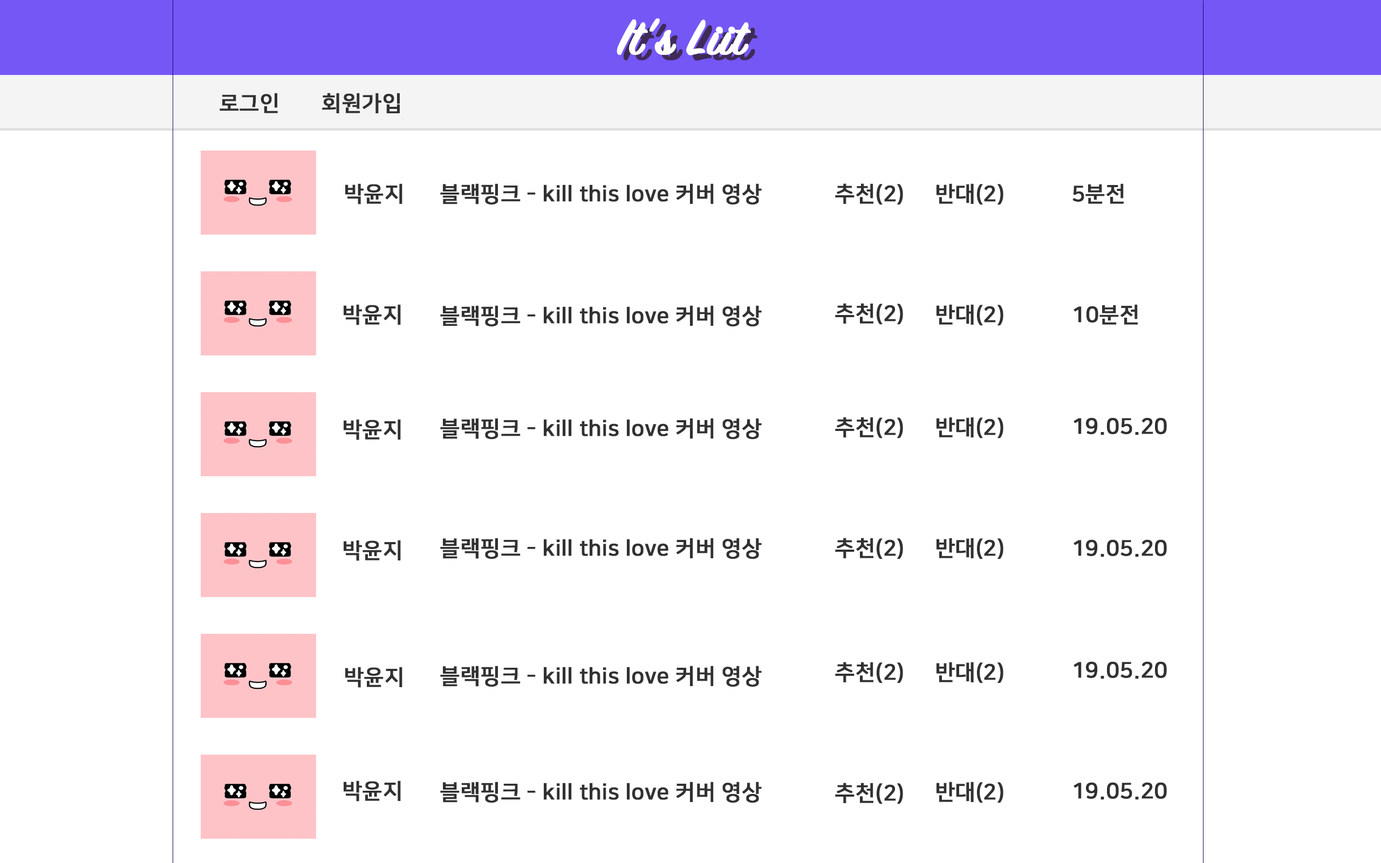
<style>
.page{position:relative;width:1381px;height:863px;background:#ffffff}
.page>*{position:absolute;margin:0}
.t1{font:54px "SignPainter-HouseScriptSemibold";color:#ffffff;font-weight:bold}
.t2{font:54px "SignPainter-HouseScriptSemibold";color:#3f2b56;font-weight:bold}
.t3{font:21.6px "NanumSquareB";color:#313131;font-weight:bold}
</style>
<div class="page">
<p class="t1" style="left:617px;top:18px;width:134px;height:38px">It’s Liit</p>
<p class="t2" style="left:623px;top:24px;width:135px;height:37px">It’s Liit</p>
<p class="t3" style="left:220px;top:93px;width:58px;height:20px">로그인</p>
<p class="t3" style="left:322px;top:93px;width:78px;height:20px">회원가입</p>
<p class="t3" style="left:345px;top:183px;width:58px;height:21px">박윤지</p>
<p class="t3" style="left:440px;top:183px;width:322px;height:22px">블랙핑크 - kill this love 커버 영상</p>
<p class="t3" style="left:835px;top:183px;width:68px;height:22px">추천(2)</p>
<p class="t3" style="left:937px;top:183px;width:67px;height:22px">반대(2)</p>
<p class="t3" style="left:1073px;top:183px;width:51px;height:21px">5분전</p>
<p class="t3" style="left:344px;top:304px;width:57px;height:21px">박윤지</p>
<p class="t3" style="left:440px;top:305px;width:322px;height:22px">블랙핑크 - kill this love 커버 영상</p>
<p class="t3" style="left:835px;top:303px;width:68px;height:22px">추천(2)</p>
<p class="t3" style="left:937px;top:304px;width:67px;height:22px">반대(2)</p>
<p class="t3" style="left:1074px;top:304px;width:64px;height:21px">10분전</p>
<p class="t3" style="left:344px;top:419px;width:57px;height:21px">박윤지</p>
<p class="t3" style="left:440px;top:418px;width:322px;height:22px">블랙핑크 - kill this love 커버 영상</p>
<p class="t3" style="left:835px;top:417px;width:68px;height:22px">추천(2)</p>
<p class="t3" style="left:937px;top:417px;width:67px;height:22px">반대(2)</p>
<p class="t3" style="left:1074px;top:418px;width:93px;height:17px">19.05.20</p>
<p class="t3" style="left:344px;top:540px;width:57px;height:21px">박윤지</p>
<p class="t3" style="left:440px;top:538px;width:322px;height:22px">블랙핑크 - kill this love 커버 영상</p>
<p class="t3" style="left:835px;top:538px;width:68px;height:22px">추천(2)</p>
<p class="t3" style="left:937px;top:538px;width:67px;height:22px">반대(2)</p>
<p class="t3" style="left:1074px;top:540px;width:93px;height:17px">19.05.20</p>
<p class="t3" style="left:440px;top:666px;width:322px;height:21px">블랙핑크 - kill this love 커버 영상</p>
<p class="t3" style="left:835px;top:662px;width:68px;height:22px">추천(2)</p>
<p class="t3" style="left:937px;top:662px;width:67px;height:22px">반대(2)</p>
<p class="t3" style="left:1074px;top:661px;width:93px;height:18px">19.05.20</p>
<p class="t3" style="left:345px;top:667px;width:58px;height:21px">박윤지</p>
<p class="t3" style="left:344px;top:781px;width:57px;height:21px">박윤지</p>
<p class="t3" style="left:440px;top:782px;width:322px;height:21px">블랙핑크 - kill this love 커버 영상</p>
<p class="t3" style="left:835px;top:783px;width:68px;height:21px">추천(2)</p>
<p class="t3" style="left:937px;top:782px;width:67px;height:21px">반대(2)</p>
<p class="t3" style="left:1074px;top:782px;width:93px;height:18px">19.05.20</p>
</div>
